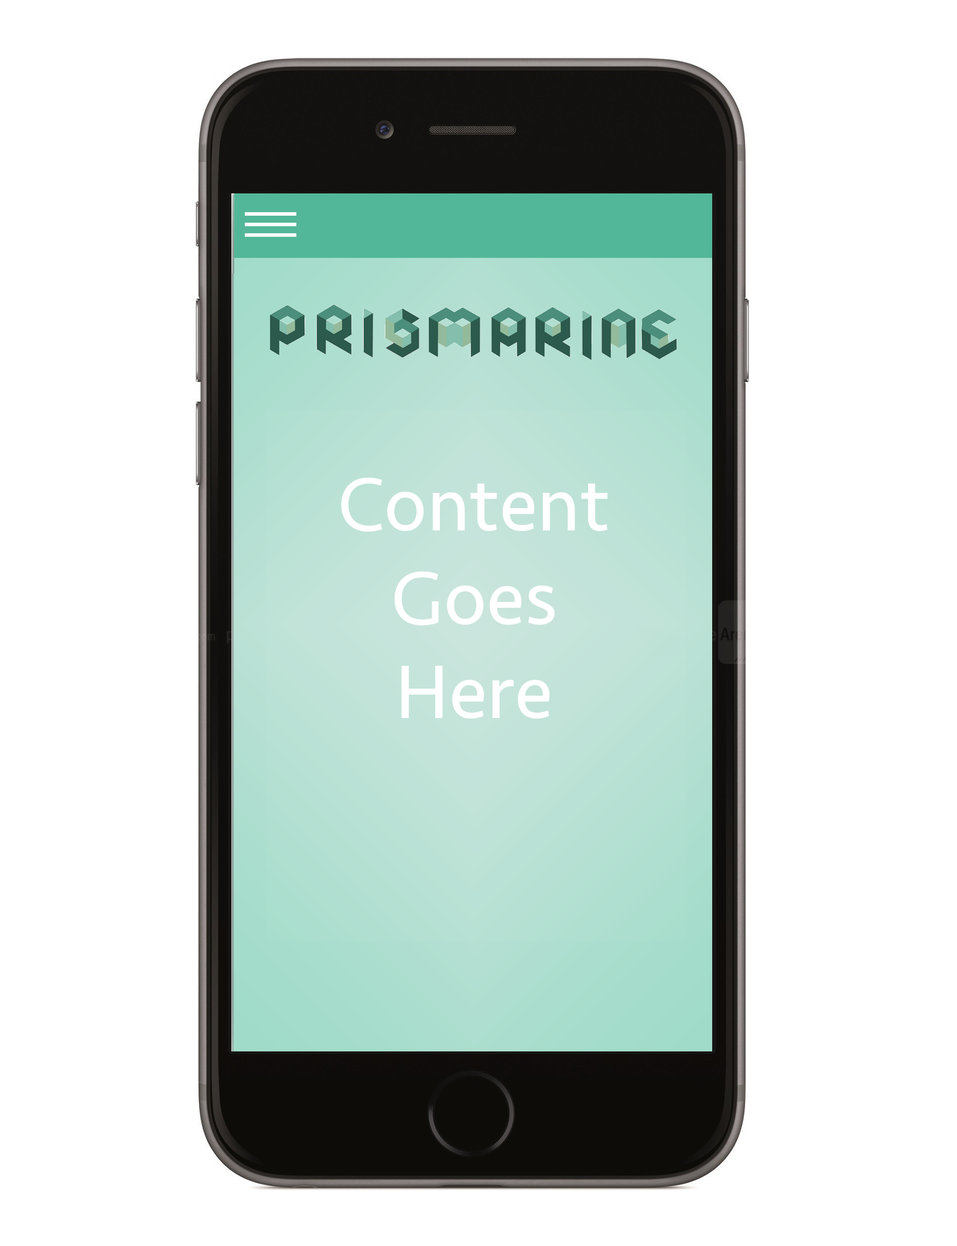
<style>
.page{position:relative;width:957px;height:1246px;background:#ffffff}
.page>*{position:absolute;margin:0}
.t1{font:78.1px "Seravek";color:#ffffff}
</style>
<div class="page">
<p class="t1" style="left:341px;top:477px;width:267px;height:241px;text-align:center">Content <br>Goes <br>Here</p>
</div>
